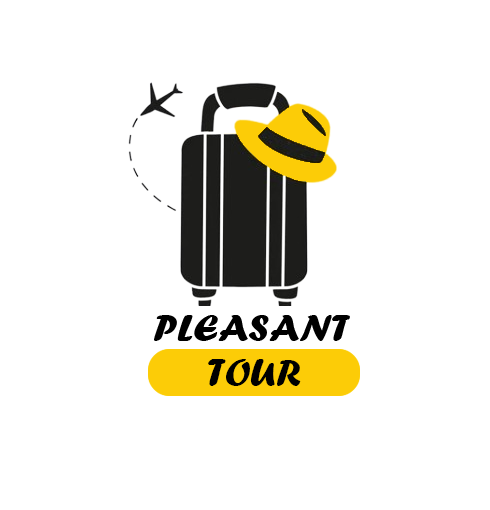
<style>
.page{position:relative;width:490px;height:510px;background:#ffffff}
.page>*{position:absolute;margin:0}
.t1{font:38.1px "ForteMT";color:#000000;scale:1.07 1}
.t2{font:39.1px "ForteMT";color:#000000;scale:1.04 1}
</style>
<div class="page">
<p class="t1" style="left:154px;top:315px;width:196px;height:26px">PLEASANT</p>
<p class="t2" style="left:208px;top:359px;width:93px;height:27px">TOUR</p>
</div>
